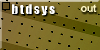
<style>
.page{position:relative;width:100px;height:50px}
.page>*{position:absolute;margin:0}
.t1{font:12.3px "Impact";letter-spacing:0.1em;color:#ffffff;scale:1.09 1}
.t2{font:11px "Arial-BoldMT";letter-spacing:-0.05em;color:#fff8c8}
</style>
<div class="page">
<p class="t1" style="left:12px;top:4px;width:43px;height:12px">btdsys</p>
<p class="t2" style="left:81px;top:4px;width:16px;height:8px">out</p>
</div>
